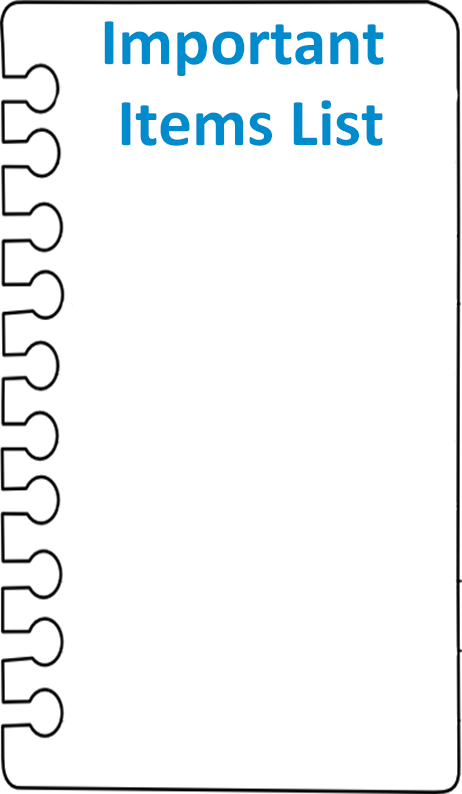
<style>
.page{position:relative;width:462px;height:794px;background:#ffffff}
.page>*{position:absolute;margin:0}
.t1{font:67.6px "Calibri-Bold";color:#008bcc}
</style>
<div class="page">
<p class="t1" style="left:104px;top:21px;width:280px;height:125px;text-align:center">Important <br>Items List</p>
</div>
